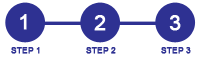
<style>
.page{position:relative;width:200px;height:57px;background:#ffffff}
.page>*{position:absolute;margin:0}
.t1{font:20.8px "ArialMT";color:#ffffff;font-weight:bold}
.t2{font:8.3px "ArialMT";color:#2e3192;font-weight:bold}
</style>
<div class="page">
<p class="t1" style="left:20px;top:14px;width:7px;height:16px">1</p>
<p class="t1" style="left:94px;top:15px;width:12px;height:16px">2</p>
<p class="t1" style="left:169px;top:15px;width:12px;height:16px">3</p>
<p class="t2" style="left:11px;top:47px;width:29px;height:7px">STEP 1</p>
<p class="t2" style="left:86px;top:47px;width:30px;height:7px">STEP 2</p>
<p class="t2" style="left:161px;top:47px;width:30px;height:7px">STEP 3</p>
</div>
